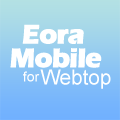
<style>
.page{position:relative;width:120px;height:120px}
.page>*{position:absolute;margin:0}
.t1{font:27.6px "ErasITC-Bold";letter-spacing:-0.05em;color:#ffffff;font-weight:bold}
.t2{font:13.8px "ArialMT";color:#ffffff}
.t3{font:20.7px "ArialMT";color:#ffffff}
</style>
<div class="page">
<p class="t1" style="left:22px;top:24px;width:62px;height:20px">Eora</p>
<p class="t1" style="left:10px;top:48px;width:92px;height:20px">Mobile</p>
<p class="t2" style="left:23px;top:71px;width:17px;height:11px">for</p>
<p class="t3" style="left:40px;top:69px;width:71px;height:20px">Webtop</p>
</div>
